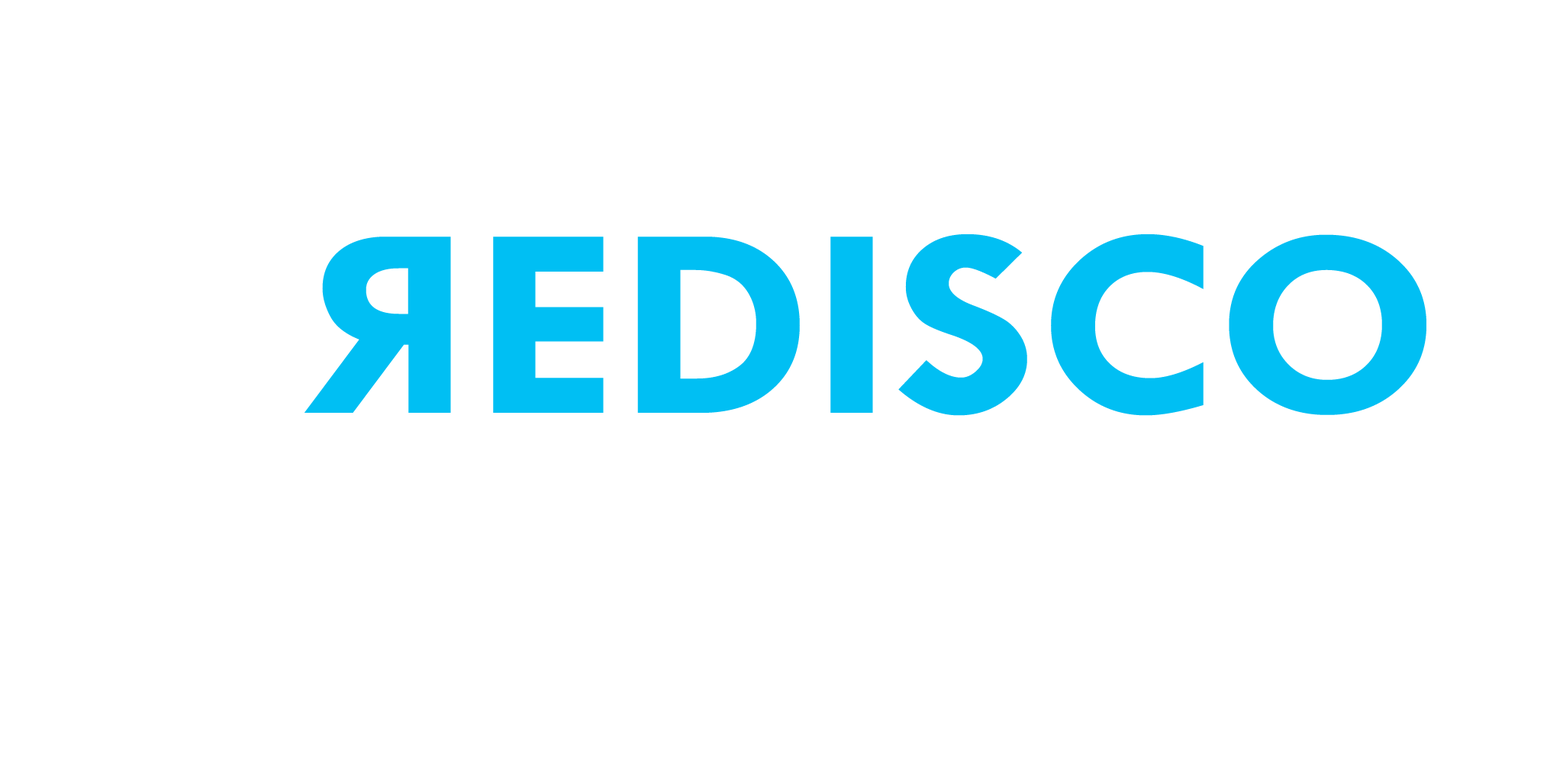
<style>
.page{position:relative;width:1563px;height:763px;background:#ffffff}
.page>*{position:absolute;margin:0}
.t1{font:274.7px "TwCenMT-Bold";color:#00bff3;scale:1.11 1}
</style>
<div class="page">
<p class="t1" style="left:304px;top:237px;width:147px;height:176px;rotate:180deg">R</p>
<p class="t1" style="left:493px;top:234px;width:933px;height:182px">EDISCO</p>
</div>
